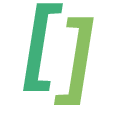
<style>
.page{position:relative;width:116px;height:116px;background:#ffffff}
.page>*{position:absolute;margin:0}
.t1{font:100px "Rambla-BoldItalic";color:#40af7a}
.t2{font:100px "Rambla-BoldItalic";color:#8bbf61}
</style>
<div class="page">
<p class="t1" style="left:23px;top:3px;width:40px;height:88px">[</p>
<p class="t2" style="left:54px;top:17px;width:40px;height:88px">]</p>
</div>
